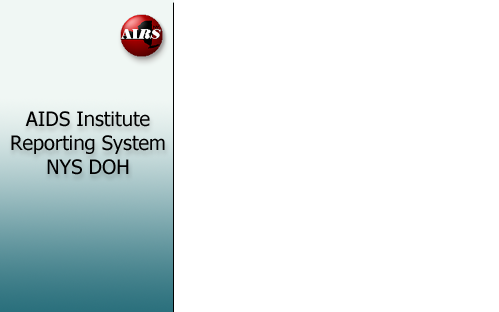
<style>
.page{position:relative;width:499px;height:312px;background:#ffffff}
.page>*{position:absolute;margin:0}
.t1{font:20px "Tahoma";color:#000000}
</style>
<div class="page">
<p class="t1" style="left:11px;top:111px;width:154px;height:64px;text-align:center">AIDS Institute <br>Reporting System<br>NYS DOH</p>
</div>
